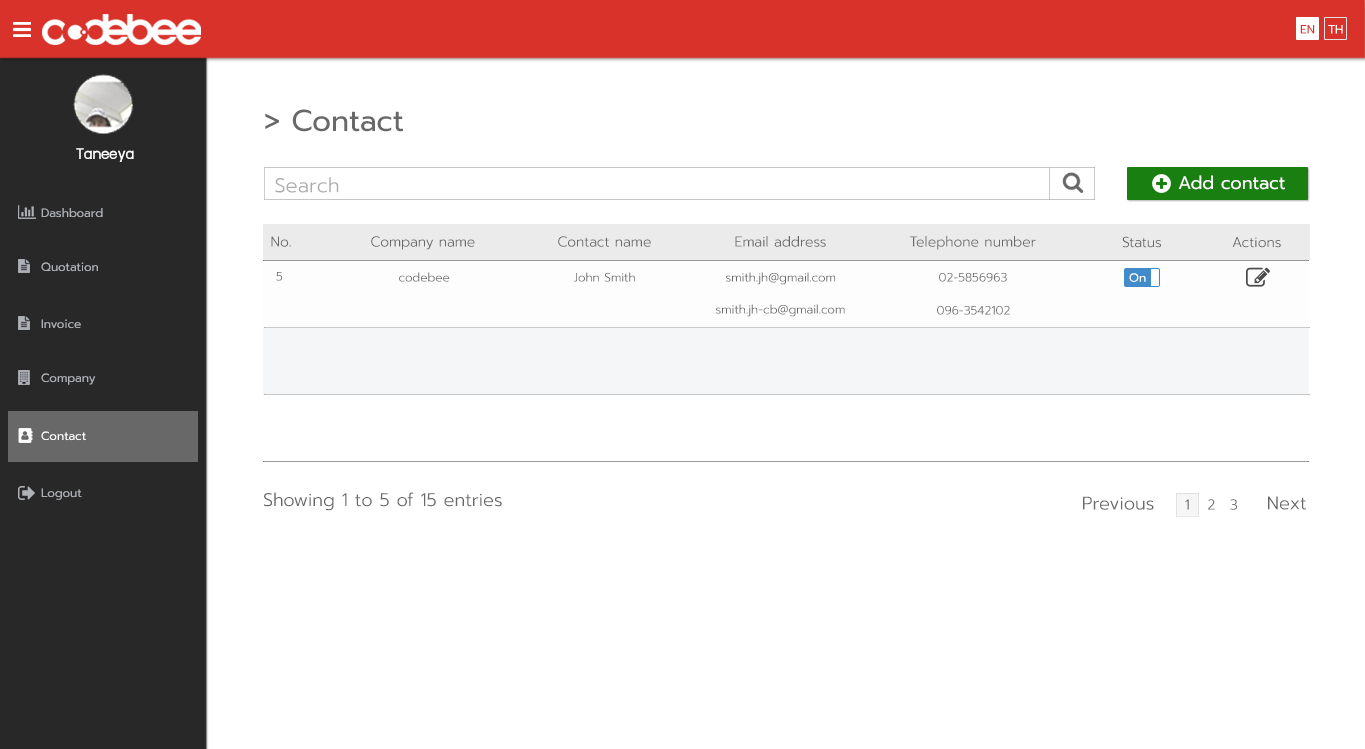
<style>
.page{position:relative;width:1365px;height:749px;background:#ffffff}
.page>*{position:absolute;margin:0}
.t1{font:12px "Prompt-Regular";color:#d8322b}
.t2{font:12px "Prompt-Regular";color:#ffffff}
.t3{font:30px "Prompt-Regular";color:#686868}
.t4{font:18px "supermarket";color:#ffffff}
.t5{font:20px "Prompt-Light";color:#acacac}
.t6{font:18px "Prompt-Regular";color:#ffffff}
.t7{font:12px "Prompt-Regular";color:#aeb2b7}
.t8{font:14px "Prompt-Light";color:#686868}
.t9{font:12px "Prompt-Light";color:#686868}
.t10{font:18px "Prompt-Light";color:#686868}
</style>
<div class="page">
<p class="t1" style="left:1300px;top:25px;width:15px;height:9px">EN</p>
<p class="t2" style="left:1328px;top:25px;width:15px;height:9px">TH</p>
<p class="t3" style="left:265px;top:109px;width:138px;height:23px">&gt; Contact</p>
<p class="t4" style="left:76px;top:148px;width:58px;height:14px">Taneeya</p>
<p class="t5" style="left:275px;top:177px;width:64px;height:16px">Search</p>
<p class="t6" style="left:1178px;top:175px;width:107px;height:15px">Add contact</p>
<p class="t7" style="left:41px;top:208px;width:62px;height:10px">Dashboard</p>
<p class="t8" style="left:271px;top:236px;width:20px;height:11px">No.</p>
<p class="t8" style="left:371px;top:236px;width:104px;height:14px">Company name</p>
<p class="t8" style="left:558px;top:236px;width:93px;height:11px">Contact name</p>
<p class="t8" style="left:735px;top:236px;width:91px;height:11px">Email address</p>
<p class="t8" style="left:910px;top:236px;width:126px;height:14px">Telephone number</p>
<p class="t8" style="left:1122px;top:236px;width:39px;height:12px">Status</p>
<p class="t8" style="left:1232px;top:237px;width:49px;height:11px">Actions</p>
<p class="t7" style="left:41px;top:262px;width:57px;height:10px">Quotation</p>
<p class="t9" style="left:276px;top:272px;width:7px;height:9px">5</p>
<p class="t9" style="left:399px;top:272px;width:51px;height:10px">codebee</p>
<p class="t9" style="left:573px;top:272px;width:62px;height:10px">John Smith</p>
<p class="t9" style="left:726px;top:272px;width:109px;height:13px">smith.jh@gmail.com</p>
<p class="t9" style="left:939px;top:272px;width:68px;height:10px">02-5856963</p>
<p class="t2" style="left:1129px;top:273px;width:17px;height:9px">On</p>
<p class="t9" style="left:716px;top:304px;width:129px;height:13px">smith.jh-cb@gmail.com</p>
<p class="t9" style="left:937px;top:305px;width:73px;height:10px">096-3542102</p>
<p class="t7" style="left:41px;top:319px;width:40px;height:10px">Invoice</p>
<p class="t7" style="left:41px;top:373px;width:55px;height:12px">Company</p>
<p class="t2" style="left:41px;top:431px;width:45px;height:10px">Contact</p>
<p class="t7" style="left:41px;top:488px;width:41px;height:12px">Logout</p>
<p class="t10" style="left:264px;top:492px;width:238px;height:19px">Showing 1 to 5 of 15 entries</p>
<p class="t10" style="left:1083px;top:496px;width:71px;height:14px">Previous</p>
<p class="t10" style="left:1268px;top:496px;width:38px;height:14px">Next</p>
<p class="t8" style="left:1185px;top:499px;width:4px;height:11px">1</p>
<p class="t8" style="left:1208px;top:499px;width:7px;height:11px">2</p>
<p class="t8" style="left:1230px;top:499px;width:7px;height:11px">3</p>
</div>
